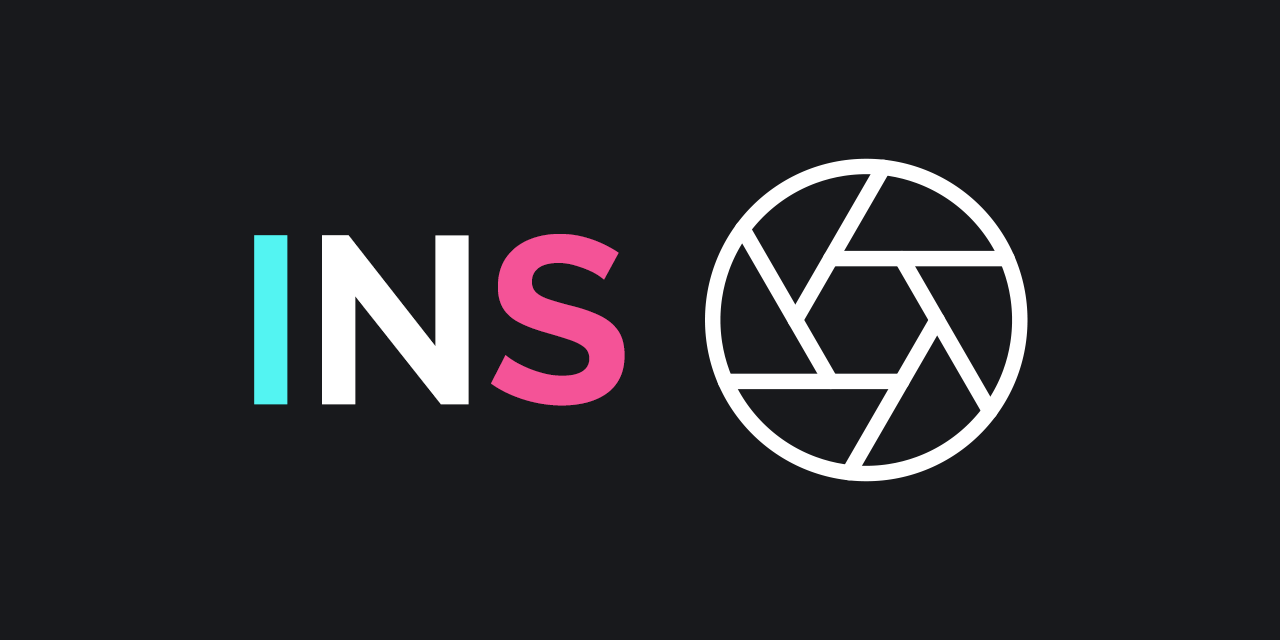
<style>
.page{position:relative;width:1280px;height:640px;background:#18191c}
.page>*{position:absolute;margin:0}
.t1{font:237.6px "Raleway-Bold";color:#53f4f2}
.t2{font:237.6px "Raleway-Bold";color:#ffffff}
.t3{font:237.6px "Raleway-Bold";color:#f45397}
</style>
<div class="page">
<p class="t1" style="left:254px;top:234px;width:371px;height:172px">I<span class="t2">N</span><span class="t3">S</span></p>
</div>
